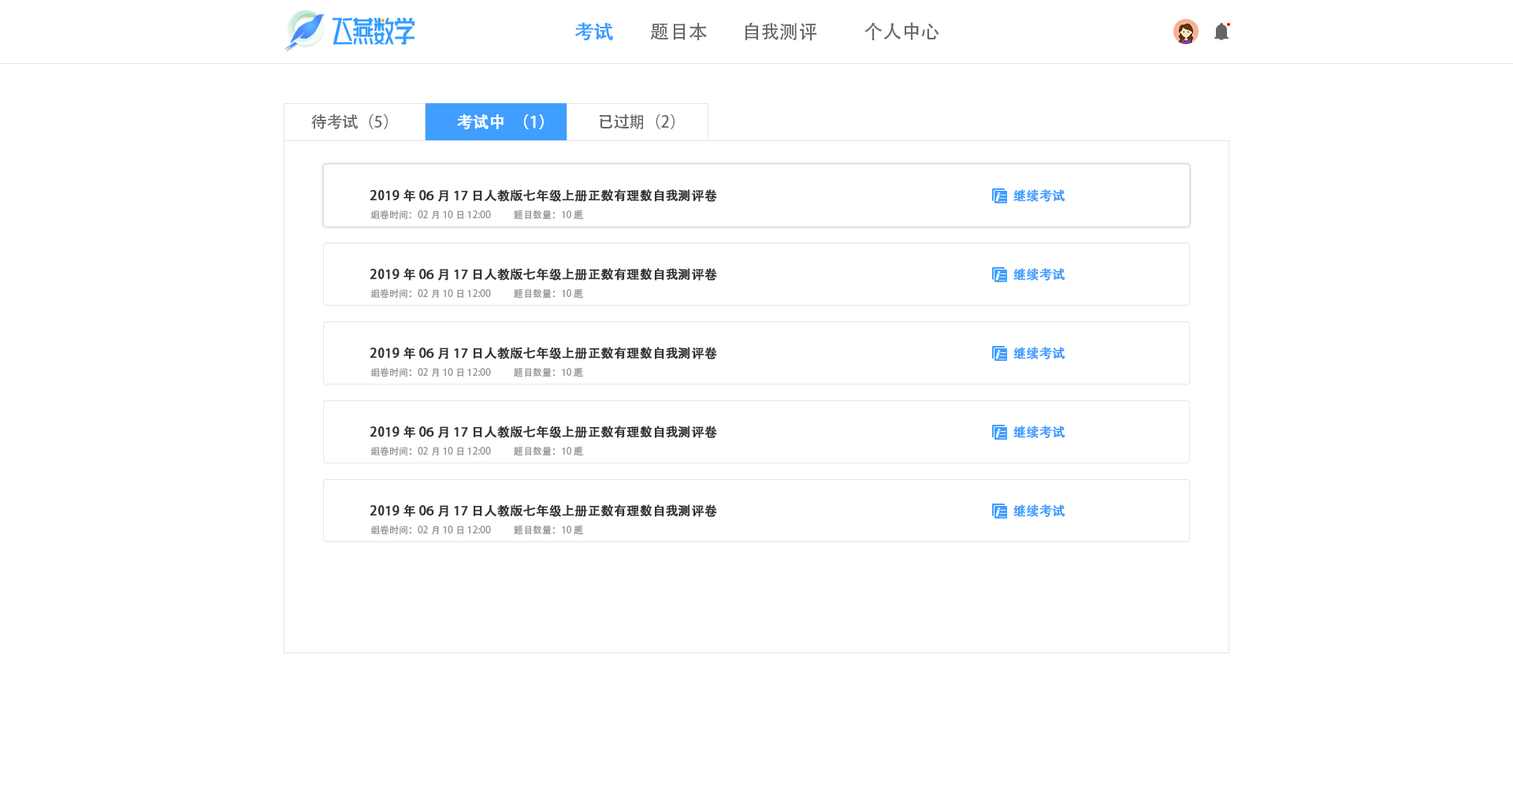
<style>
.page{position:relative;width:1513px;height:788px;background:#ffffff}
.page>*{position:absolute;margin:0}
.t1{font:18.9px "AdobeHeitiStd-Regular";color:#409eff;font-weight:bold}
.t2{font:18.9px "AdobeHeitiStd-Regular";color:#666666}
.t3{font:15.8px "AdobeHeitiStd-Regular";color:#666666}
.t4{font:15.8px "AdobeHeitiStd-Regular";color:#ffffff;font-weight:bold}
.t5{font:12.6px "AdobeHeitiStd-Regular";color:#333333;font-weight:bold}
.t6{font:12.6px "AdobeHeitiStd-Regular";color:#409eff;font-weight:bold}
.t7{font:9.5px "AdobeHeitiStd-Regular";color:#999999}
</style>
<div class="page">
<p class="t1" style="left:575px;top:22px;width:38px;height:19px">考试</p>
<p class="t2" style="left:650px;top:23px;width:57px;height:17px">题目本</p>
<p class="t2" style="left:745px;top:22px;width:71px;height:19px">自我测评</p>
<p class="t2" style="left:865px;top:22px;width:74px;height:18px">个人中心</p>
<p class="t3" style="left:311px;top:114px;width:77px;height:15px">待考试（5）</p>
<p class="t4" style="left:457px;top:114px;width:87px;height:16px">考试中（1）</p>
<p class="t3" style="left:600px;top:114px;width:75px;height:15px">已过期（2）</p>
<p class="t5" style="left:370px;top:189px;width:347px;height:13px">2019年06月17日人教版七年级上册正数有理数自我测评卷</p>
<p class="t6" style="left:1013px;top:189px;width:52px;height:14px">继续考试</p>
<p class="t7" style="left:370px;top:210px;width:121px;height:10px">组卷时间：02月10日 12:00</p>
<p class="t7" style="left:514px;top:210px;width:70px;height:9px">题目数量：10题</p>
<p class="t5" style="left:370px;top:268px;width:347px;height:13px">2019年06月17日人教版七年级上册正数有理数自我测评卷</p>
<p class="t6" style="left:1013px;top:268px;width:52px;height:13px">继续考试</p>
<p class="t7" style="left:370px;top:288px;width:121px;height:11px">组卷时间：02月10日 12:00</p>
<p class="t7" style="left:514px;top:288px;width:70px;height:10px">题目数量：10题</p>
<p class="t5" style="left:370px;top:347px;width:347px;height:12px">2019年06月17日人教版七年级上册正数有理数自我测评卷</p>
<p class="t6" style="left:1013px;top:347px;width:52px;height:13px">继续考试</p>
<p class="t7" style="left:370px;top:367px;width:121px;height:10px">组卷时间：02月10日 12:00</p>
<p class="t7" style="left:514px;top:367px;width:70px;height:10px">题目数量：10题</p>
<p class="t5" style="left:370px;top:426px;width:347px;height:12px">2019年06月17日人教版七年级上册正数有理数自我测评卷</p>
<p class="t6" style="left:1013px;top:426px;width:52px;height:13px">继续考试</p>
<p class="t7" style="left:370px;top:446px;width:121px;height:10px">组卷时间：02月10日 12:00</p>
<p class="t7" style="left:514px;top:446px;width:70px;height:10px">题目数量：10题</p>
<p class="t5" style="left:370px;top:504px;width:347px;height:13px">2019年06月17日人教版七年级上册正数有理数自我测评卷</p>
<p class="t6" style="left:1013px;top:504px;width:52px;height:14px">继续考试</p>
<p class="t7" style="left:370px;top:525px;width:121px;height:10px">组卷时间：02月10日 12:00</p>
<p class="t7" style="left:514px;top:525px;width:70px;height:9px">题目数量：10题</p>
</div>
